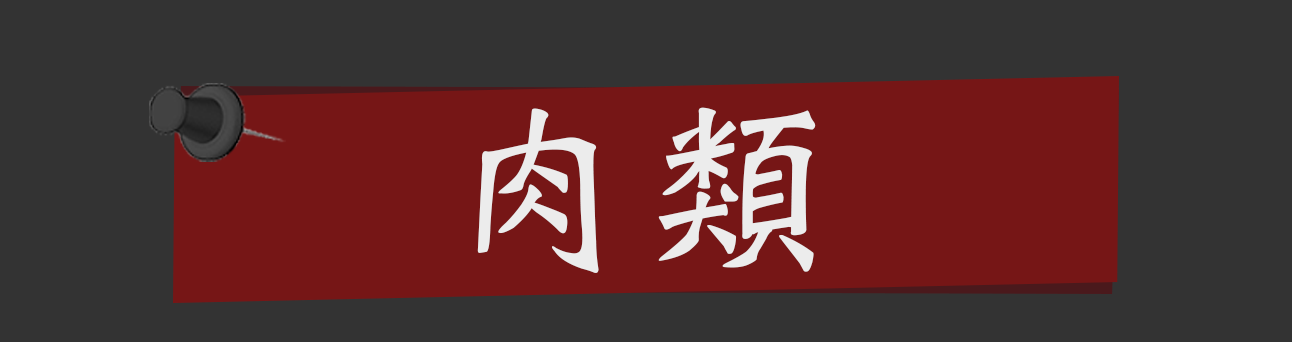
<style>
.page{position:relative;width:1292px;height:342px;background:#333333}
.page>*{position:absolute;margin:0}
.t1{font:199.8px "WeibeiTC-Bold";color:#ececec}
</style>
<div class="page">
<p class="t1" style="left:477px;top:107px;width:339px;height:166px">肉類</p>
</div>
